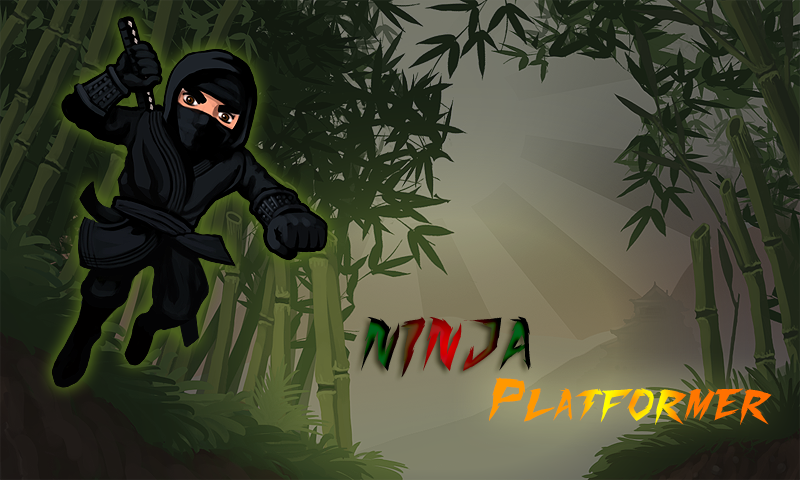
<style>
.page{position:relative;width:800px;height:480px}
.page>*{position:absolute;margin:0}
.t1{font:60px "FightingSpiritTBS"}
.t2{font:48px "FightingSpiritTBS"}
</style>
<div class="page">
<p class="t1" style="left:361px;top:316px;width:171px;height:62px">NINJA</p>
<p class="t2" style="left:489px;top:377px;width:283px;height:48px">Platformer</p>
</div>
